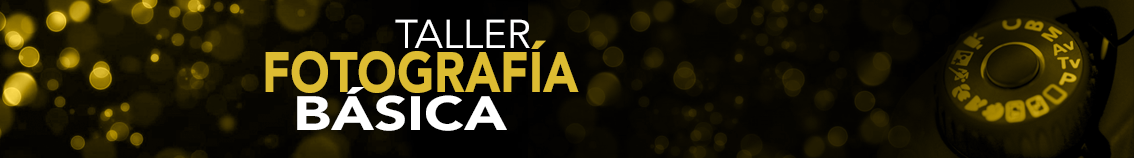
<style>
.page{position:relative;width:1134px;height:158px}
.page>*{position:absolute;margin:0}
.t1{font:39.7px "Avenir-Book";color:#ffffff}
.t2{font:56.6px "Avenir-Black";color:#ddbc32;scale:0.84 1}
.t3{font:47.5px "Avenir-Black";color:#ffffff;scale:1.22 1}
</style>
<div class="page">
<p class="t1" style="left:395px;top:19px;width:135px;height:29px">TALLER</p>
<p class="t2" style="left:265px;top:40px;width:314px;height:53px">FOTOGRAFÍA</p>
<p class="t3" style="left:297px;top:87px;width:210px;height:44px">BÁSICA</p>
</div>
